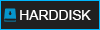
<style>
.page{position:relative;width:100px;height:30px;background:#202020}
.page>*{position:absolute;margin:0}
.t1{font:14px "ArialMT";letter-spacing:-0.01em;color:#ffffff}
</style>
<div class="page">
<p class="t1" style="left:20px;top:10px;width:71px;height:10px">HARDDISK</p>
</div>
